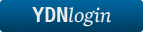
<style>
.page{position:relative;width:143px;height:32px}
.page>*{position:absolute;margin:0}
.t1{font:20px "QuioscoTwo-Italic";color:#ebebeb}
.t2{font:20px "Menlo-Bold";color:#ebebeb}
</style>
<div class="page">
<p class="t1" style="left:32px;top:7px;width:79px;height:20px"><span class="t2">YDN</span>login</p>
</div>
